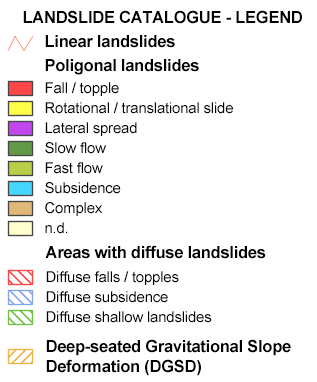
<style>
.page{position:relative;width:317px;height:382px;background:#ffffff}
.page>*{position:absolute;margin:0}
.t1{font:16.5px "Arial-BoldMT";letter-spacing:-0.015em;color:#000100}
.t2{font:15px/20px "ArialMT";letter-spacing:-0.015em;color:#000100}
.t3{font:16.5px/20px "Arial-BoldMT";letter-spacing:-0.015em;color:#000100}
</style>
<div class="page">
<p class="t1" style="left:23px;top:10px;width:279px;height:14px">LANDSLIDE CATALOGUE - LEGEND</p>
<p class="t1" style="left:45px;top:35px;width:130px;height:13px">Linear landslides</p>
<p class="t1" style="left:45px;top:59px;width:154px;height:16px">Poligonal landslides</p>
<p class="t2" style="left:45px;top:82px;width:188px;height:152px">Fall / topple<br>Rotational / translational slide<br>Lateral spread<br>Slow flow<br>Fast flow<br>Subsidence<br>Complex<br>n.d.</p>
<p class="t1" style="left:45px;top:245px;width:221px;height:14px">Areas with diffuse landslides</p>
<p class="t2" style="left:46px;top:271px;width:166px;height:52px">Diffuse falls / topples<br>Diffuse subsidence<br>Diffuse shallow landslides</p>
<p class="t3" style="left:46px;top:339px;width:245px;height:37px">Deep-seated Gravitational Slope<br>Deformation (DGSD)</p>
</div>
